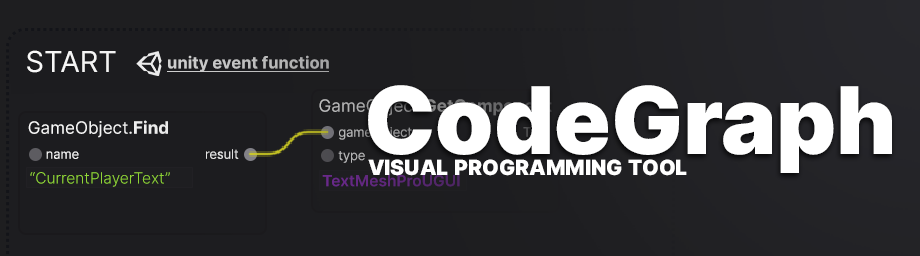
<style>
.page{position:relative;width:920px;height:256px}
.page>*{position:absolute;margin:0}
.t1{font:41.4px "Inter-Regular";color:#ffffff;font-variant:small-caps}
.t2{font:16.6px "Inter-Bold";color:#bfbfc0}
.t3{font:93.3px "Inter-Black";color:#ffffff}
.t4{font:17.1px "Inter-Regular";color:#ffffff}
.t5{font:17.1px "Inter-Bold";color:#ffffff}
.t6{font:12.9px "Inter-LightBETA"}
.t7{font:12.9px "Inter-LightBETA";color:#e0e0e0}
.t8{font:12.9px "Inter-LightBETA";color:#ffffff}
.t9{font:12.9px "Inter-LightBETA";color:#b4b4b5}
.t10{font:30px "Inter-Black";color:#ffffff;font-variant:small-caps}
.t11{font:15.5px "Inter-LightBETA";color:#96df38}
.t12{font:15.5px "Inter-SemiBold";color:#5c2778}
</style>
<div class="page">
<p class="t1" style="left:27px;top:50px;width:89px;height:23px">start</p>
<p class="t2" style="left:168px;top:55px;width:161px;height:17px">unity event function</p>
<p class="t3" style="left:368px;top:85px;width:524px;height:88px">CodeGraph</p>
<p class="t4" style="left:28px;top:120px;width:140px;height:18px">GameObject.<span class="t5">Find</span></p>
<p class="t6" style="left:523px;top:127px;width:8px;height:10px">T</p>
<p class="t7" style="left:206px;top:149px;width:33px;height:10px">result</p>
<p class="t8" style="left:46px;top:151px;width:33px;height:8px">name</p>
<p class="t9" style="left:338px;top:151px;width:27px;height:12px">type</p>
<p class="t10" style="left:368px;top:159px;width:319px;height:17px">visual programming tool</p>
<p class="t11" style="left:30px;top:172px;width:140px;height:15px">“CurrentPlayerText”</p>
<p class="t12" style="left:322px;top:174px;width:138px;height:13px">TextMeshProUGUI</p>
</div>
